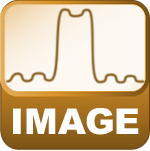
<style>
.page{position:relative;width:150px;height:151px;background:#fdf9f2}
.page>*{position:absolute;margin:0}
.t1{font:35.7px "Arial-Black";color:#ffffff}
</style>
<div class="page">
<p class="t1" style="left:13px;top:108px;width:126px;height:27px">IMAGE</p>
</div>
